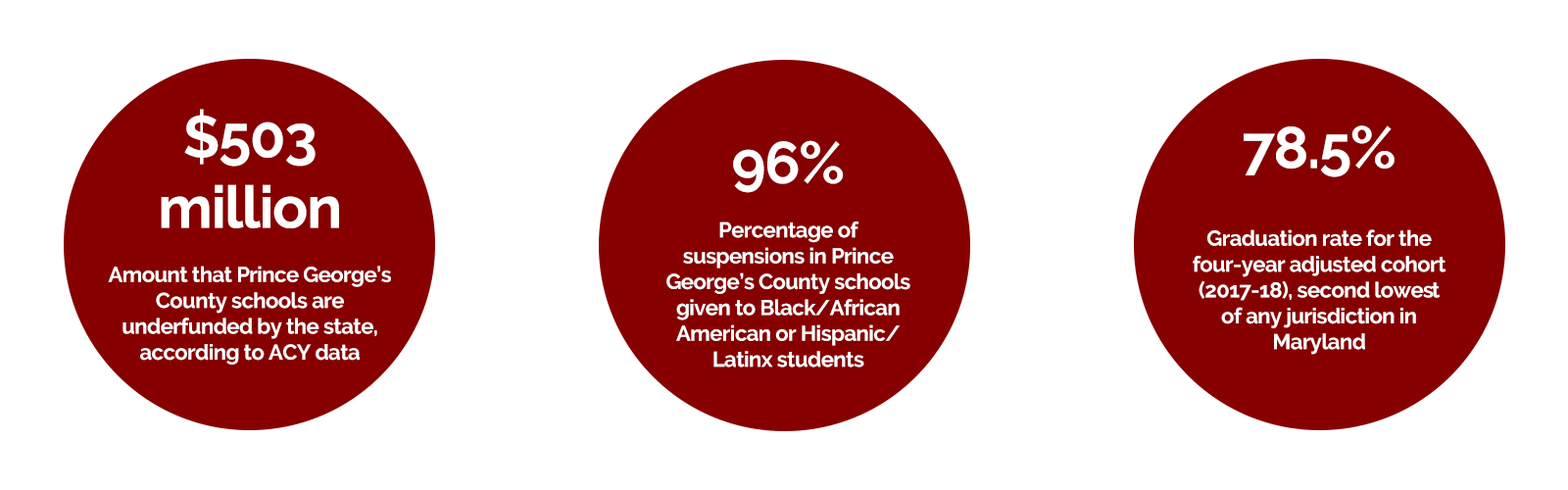
<style>
.page{position:relative;width:1568px;height:490px;background:#ffffff}
.page>*{position:absolute;margin:0}
.t1{font:21.6px "Raleway-Bold";letter-spacing:-0.025em;color:#ffffff}
.t2{font:58.8px "Raleway-Bold";letter-spacing:-0.025em;color:#ffffff}
</style>
<div class="page">
<p class="t1" style="left:108px;top:109px;width:283px;height:256px;text-align:justify"><span class="t2">$503<br>million<br><br></span>Amount that Prince George’s County schools are<br>underfunded by the state,<br>according to ACY data</p>
<p class="t1" style="left:1193px;top:125px;width:253px;height:230px;text-align:justify"><span class="t2">78.5%<br></span><br><br>Graduation rate for the<br>four-year adjusted cohort (2017-18), second lowest<br>of any jurisdiction in<br>Maryland</p>
<p class="t1" style="left:666px;top:140px;width:244px;height:228px;text-align:justify"><span class="t2">96%<br><br></span>Percentage of<br>suspensions in Prince George’s County schools given to Black/African American or Hispanic/ Latinx students</p>
</div>
